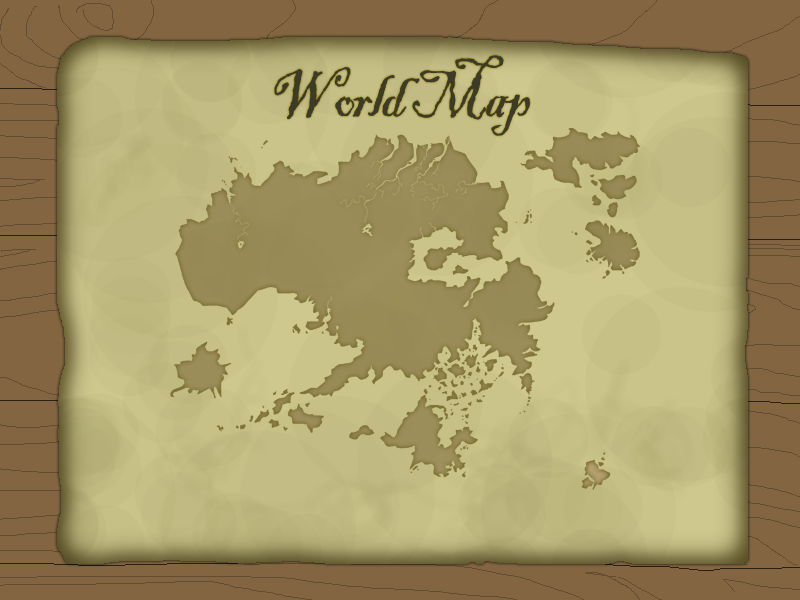
<style>
.page{position:relative;width:800px;height:600px;background:#836641}
.page>*{position:absolute;margin:0}
.t1{font:72px "BlackadderITC-Regular";letter-spacing:-0.05em;color:#3c3a29;scale:0.9 1}
</style>
<div class="page">
<p class="t1" style="left:274px;top:55px;width:257px;height:81px">World Map</p>
</div>
